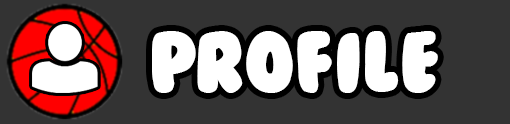
<style>
.page{position:relative;width:510px;height:124px;background:#333333}
.page>*{position:absolute;margin:0}
.t1{font:80px "BubbleGum";color:#ffffff}
</style>
<div class="page">
<p class="t1" style="left:152px;top:31px;width:286px;height:62px">Profile</p>
</div>
